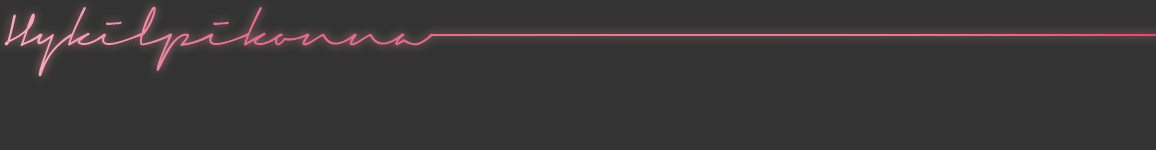
<style>
.page{position:relative;width:1156px;height:150px;background:#333333}
.page>*{position:absolute;margin:0}
.t1{font:38.7px/86.7px "SignericaFat";letter-spacing:0.02em}
</style>
<div class="page">
<p class="t1" style="left:4px;top:6px;width:429px;height:71px">Hykilpikonna</p>
</div>
